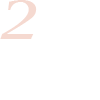
<style>
.page{position:relative;width:100px;height:100px;background:#ffffff}
.page>*{position:absolute;margin:0}
.t1{font:72px "LucidaCalligraphy-Italic";color:#f5d9d0}
</style>
<div class="page">
<p class="t1" style="left:0px;top:0px;width:37px;height:39px">2</p>
</div>
